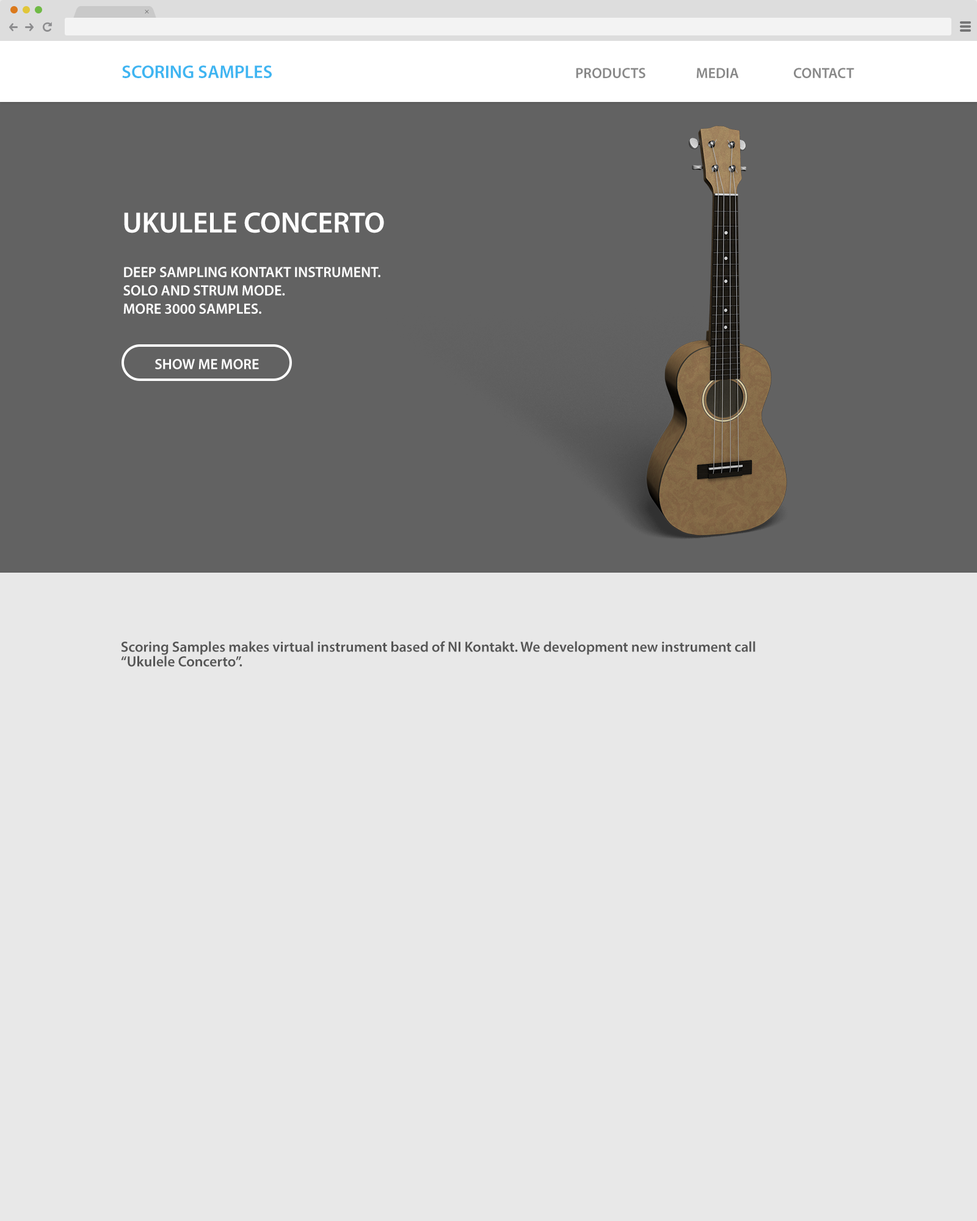
<style>
.page{position:relative;width:977px;height:1221px;background:#e8e8e8}
.page>*{position:absolute;margin:0}
.t1{font:14.2px "MavenProLight200-Regular"}
.t2{font:18.3px "MyriadPro-Semibold";color:#3eb5f1}
.t3{font:14.7px "MyriadPro-Semibold";color:#888888}
.t4{font:29.3px "MyriadPro-Semibold";color:#ffffff}
.t5{font:14.7px/18.3px "MyriadPro-Semibold";color:#ffffff}
.t6{font:14.7px "MyriadPro-Semibold";color:#ffffff;text-transform:uppercase}
.t7{font:14.7px/14.7px "MyriadPro-Semibold";color:#555555}
.t8{font:14.7px/14.7px "MyriadPro-Semibold";color:#555555;text-transform:uppercase}
</style>
<div class="page">
<p class="t1" style="left:145px;top:10px;width:4px;height:3px;rotate:-45deg">+</p>
<p class="t2" style="left:122px;top:65px;width:150px;height:13px">SCORING SAMPLES</p>
<p class="t3" style="left:576px;top:68px;width:69px;height:10px">PRODUCTS</p>
<p class="t3" style="left:697px;top:68px;width:42px;height:10px">MEDIA</p>
<p class="t3" style="left:794px;top:68px;width:60px;height:10px">CONTACT</p>
<p class="t4" style="left:124px;top:212px;width:260px;height:21px">UKULELE CONCERTO</p>
<p class="t5" style="left:123px;top:267px;width:257px;height:47px">DEEP SAMPLING KONTAKT INSTRUMENT.<br>SOLO AND STRUM MODE.<br>MORE 3000 SAMPLES.</p>
<p class="t6" style="left:155px;top:359px;width:104px;height:10px">Show me more</p>
<p class="t7" style="left:121px;top:641px;width:634px;height:26px"><span class="t8">S</span>coring Samples makes virtual instrument based of NI Kontakt. We development new instrument call<br>“Ukulele Concerto”.</p>
</div>
